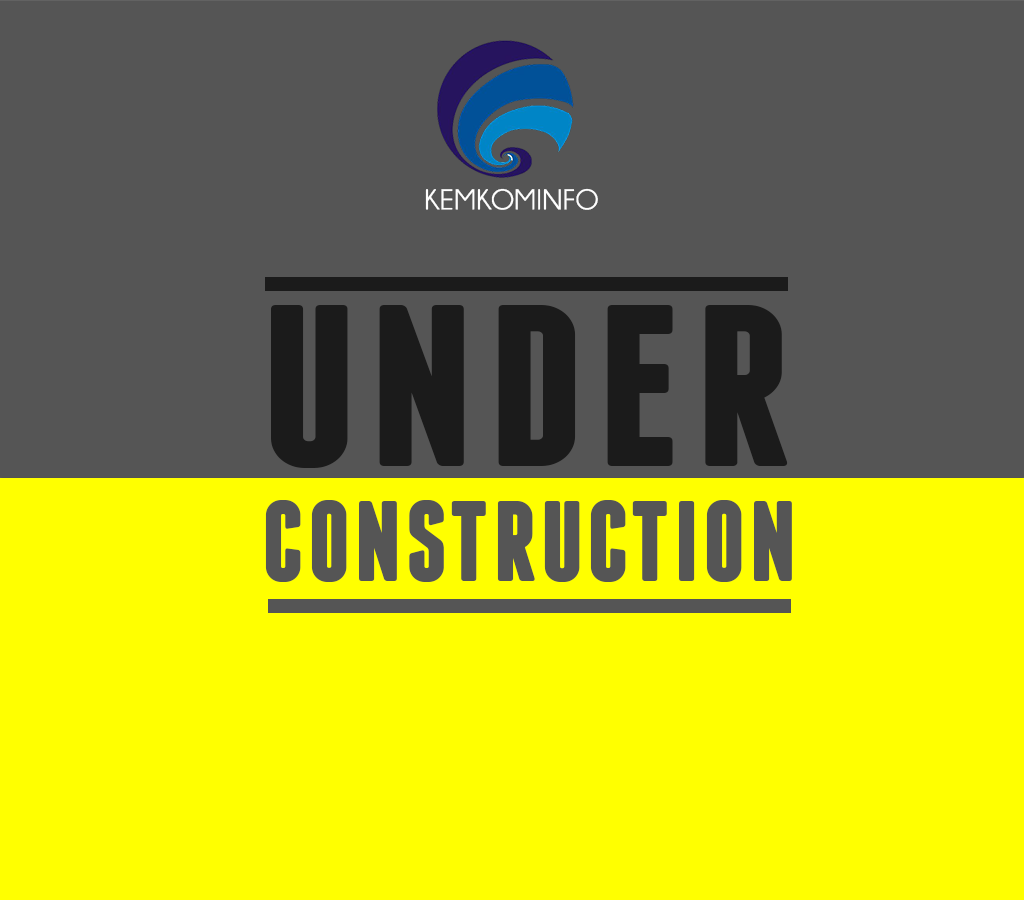
<style>
.page{position:relative;width:1024px;height:900px;background:#555555}
.page>*{position:absolute;margin:0}
.t1{font:28.5px "Champagne&Limousines";letter-spacing:0.025em;color:#fefefe;font-weight:bold}
.t2{font:227.1px "Franchise-Bold";letter-spacing:0.025em;color:#1b1b1b;font-weight:bold;scale:1.13 1}
.t3{font:112px "Franchise-Bold";letter-spacing:0.025em;color:#555555;font-weight:bold}
</style>
<div class="page">
<p class="t1" style="left:425px;top:188px;width:173px;height:22px">KEMKOMINFO</p>
<p class="t2" style="left:271px;top:305px;width:517px;height:163px">UNDER</p>
<p class="t3" style="left:265px;top:500px;width:527px;height:82px">CONSTRUCTION</p>
</div>
